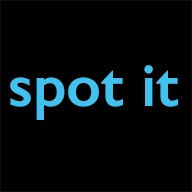
<style>
.page{position:relative;width:192px;height:192px;background:#000000}
.page>*{position:absolute;margin:0}
.t1{font:61.1px "GillSans-SemiBold";color:#43c1ee}
</style>
<div class="page">
<p class="t1" style="left:10px;top:65px;width:168px;height:55px">spot it</p>
</div>
